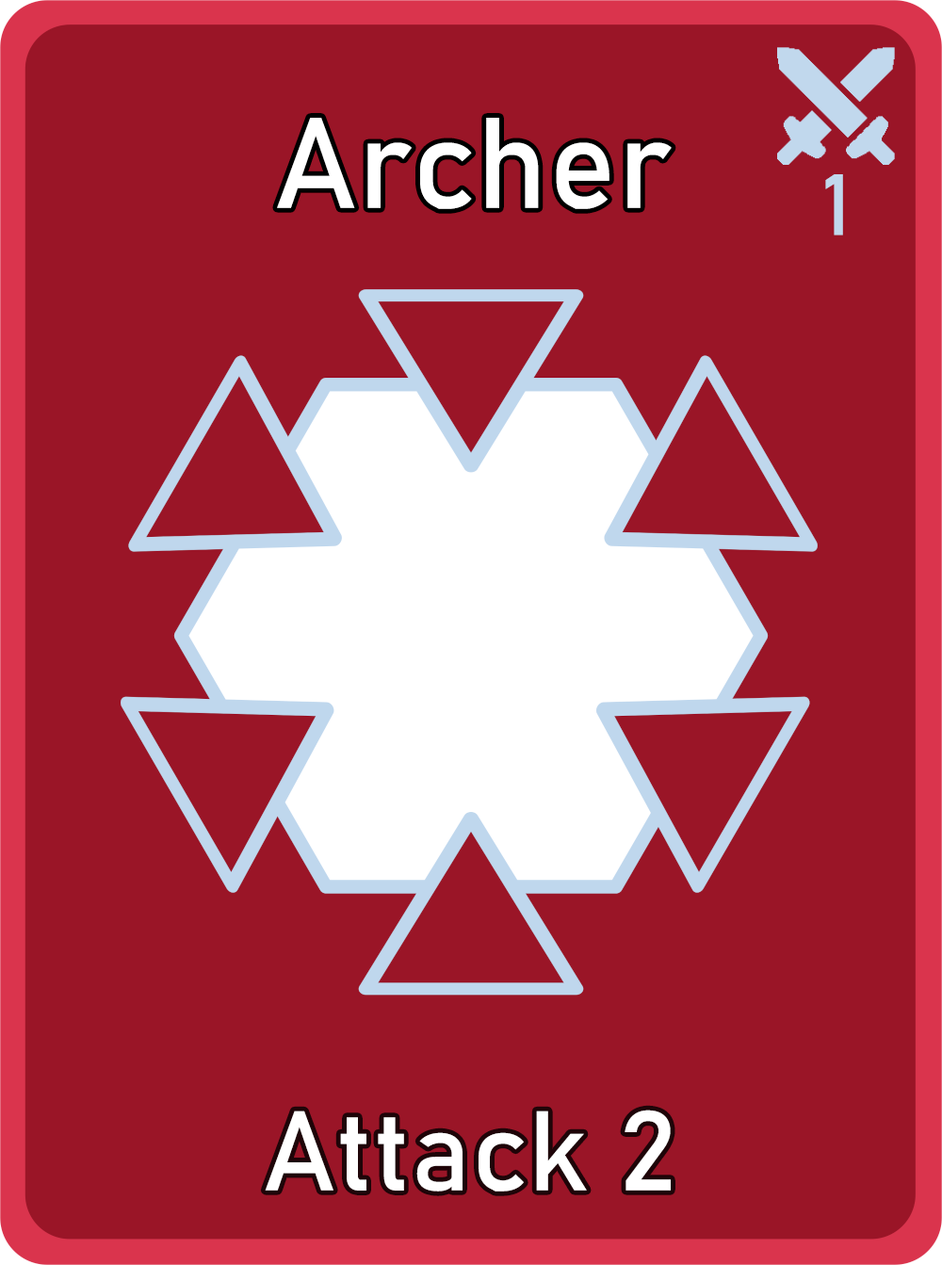
<style>
.page{position:relative;width:942px;height:1265px;background:#9a1527}
.page>*{position:absolute;margin:0}
.t1{font:126.7px "Bahnschrift";letter-spacing:0.01em;color:#ffffff}
.t2{font:85px "Bahnschrift";letter-spacing:0.01em;color:#c1d8ed}
.t3{font:111.3px "Bahnschrift";letter-spacing:0.01em;color:#ffffff}
</style>
<div class="page">
<p class="t1" style="left:277px;top:118px;width:395px;height:91px">Archer</p>
<p class="t2" style="left:825px;top:174px;width:18px;height:62px">1</p>
<p class="t3" style="left:265px;top:1110px;width:406px;height:82px">Attack 2</p>
</div>
